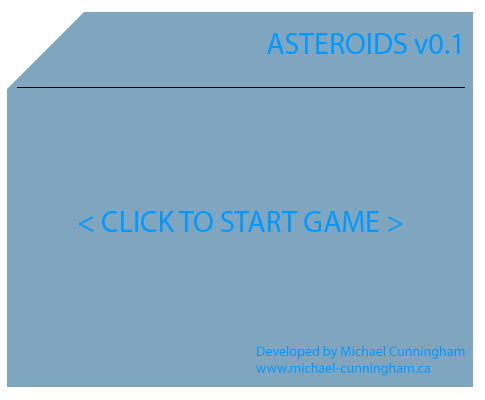
<style>
.page{position:relative;width:485px;height:400px;background:#7fa5bf}
.page>*{position:absolute;margin:0}
.t1{font:30px "MyriadPro-Regular";color:#0099ff}
.t2{font:14px "MyriadPro-Regular";color:#0099ff}
</style>
<div class="page">
<p class="t1" style="left:267px;top:33px;width:193px;height:21px">ASTEROIDS v0.1</p>
<p class="t1" style="left:79px;top:211px;width:323px;height:21px">&lt; CLICK TO START GAME &gt;</p>
<p class="t2" style="left:256px;top:346px;width:209px;height:30px">Developed by Michael Cunningham<br>www.michael-cunningham.ca</p>
</div>
